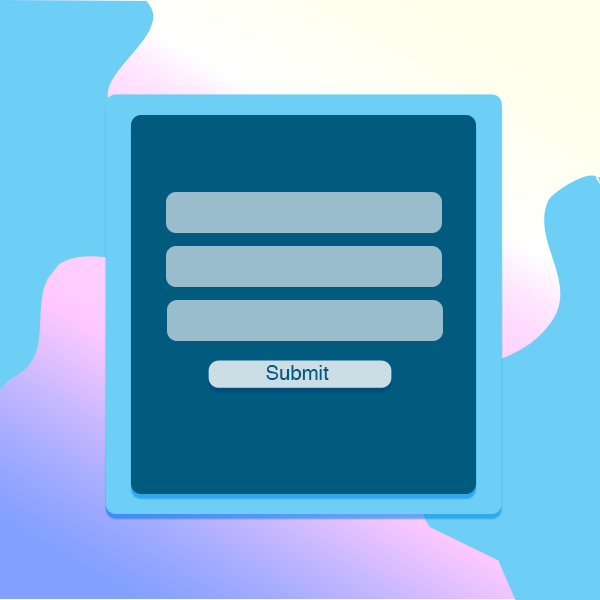
<style>
.page{position:relative;width:600px;height:600px;background:#6dcff6}
.page>*{position:absolute;margin:0}
.t1{font:20.3px "Helvetica";color:#005b7f}
</style>
<div class="page">
<p class="t1" style="left:266px;top:365px;width:63px;height:15px">Submit</p>
</div>
